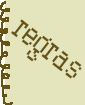
<style>
.page{position:relative;width:85px;height:105px;background:#e4e5bd}
.page>*{position:absolute;margin:0}
.t1{font:39.6px "PixelPlay";color:#675316;scale:0.92 1}
</style>
<div class="page">
<p class="t1" style="left:11px;top:19px;width:71px;height:60px;rotate:38deg">regras</p>
</div>
